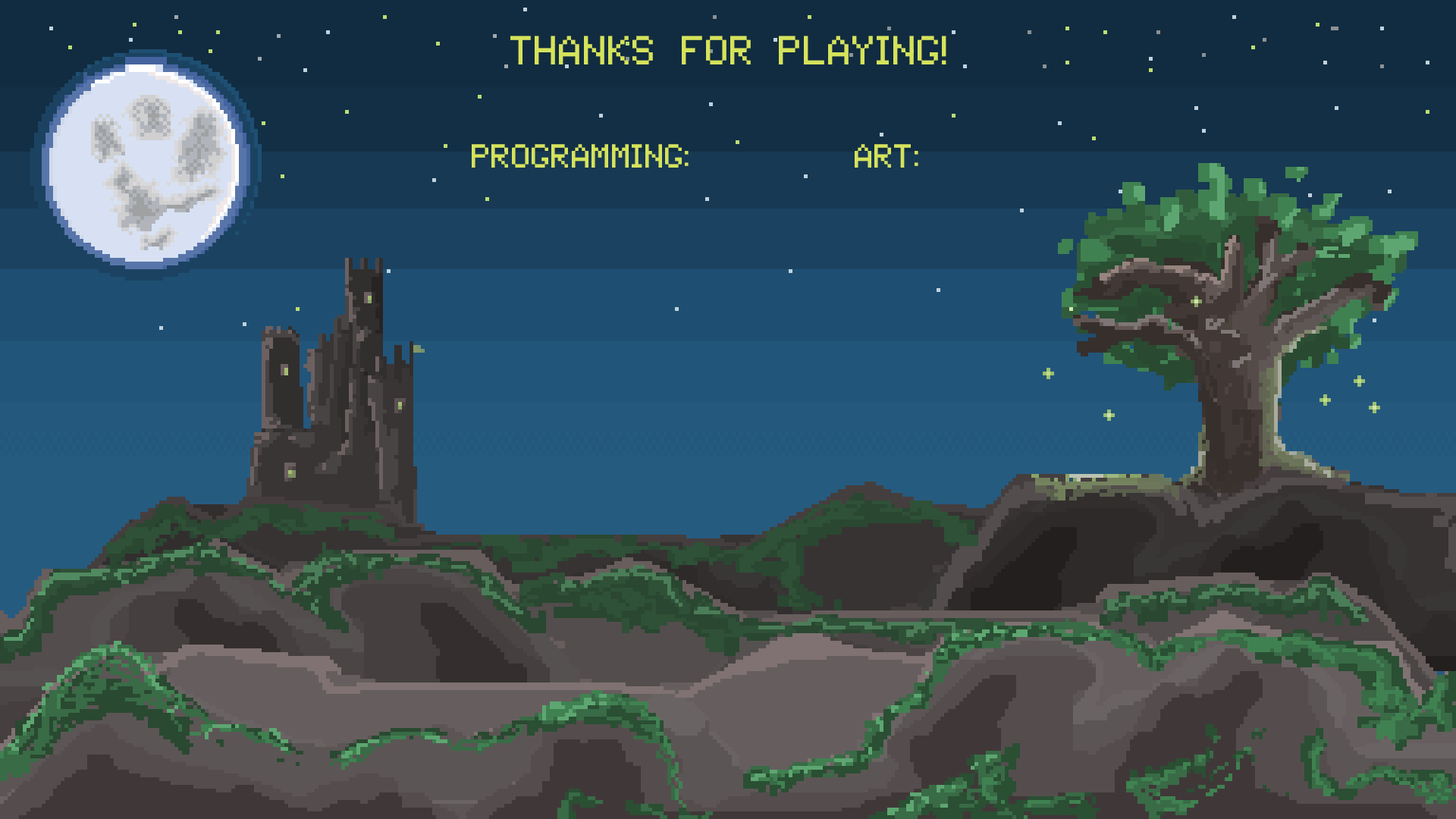
<style>
.page{position:relative;width:1456px;height:819px}
.page>*{position:absolute;margin:0}
.t1{font:41.7px "Tandysoft";color:#d5e35b}
.t2{font:34.1px "Tandysoft";color:#d5e35b}
</style>
<div class="page">
<p class="t1" style="left:510px;top:36px;width:436px;height:28px">thanks for playing!</p>
<p class="t2" style="left:472px;top:144px;width:217px;height:24px">Programming:</p>
<p class="t2" style="left:855px;top:144px;width:63px;height:24px">ART:</p>
</div>
